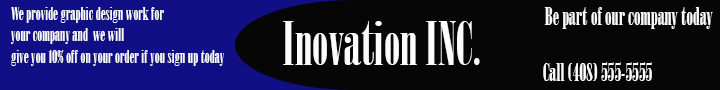
<style>
.page{position:relative;width:720px;height:90px;background:#050605}
.page>*{position:absolute;margin:0}
.t1{font:18px "Onyx";color:#fefdfd}
.t2{font:24px "Onyx";color:#fefdfd}
.t3{font:24px "Onyx";color:#fcfcfd}
.t4{font:60px "Onyx";color:#fcfcfd}
</style>
<div class="page">
<p class="t1" style="left:11px;top:7px;width:213px;height:59px"><span class="t2"><br></span>We provide graphic design work for<br>your company and  we will <br>give you 10% off on your order if you sign up today</p>
<p class="t3" style="left:544px;top:7px;width:169px;height:22px">Be part of our company today</p>
<p class="t4" style="left:283px;top:21px;width:197px;height:44px">Inovation INC.</p>
<p class="t2" style="left:543px;top:62px;width:109px;height:19px">Call (408) 555-5555</p>
</div>
